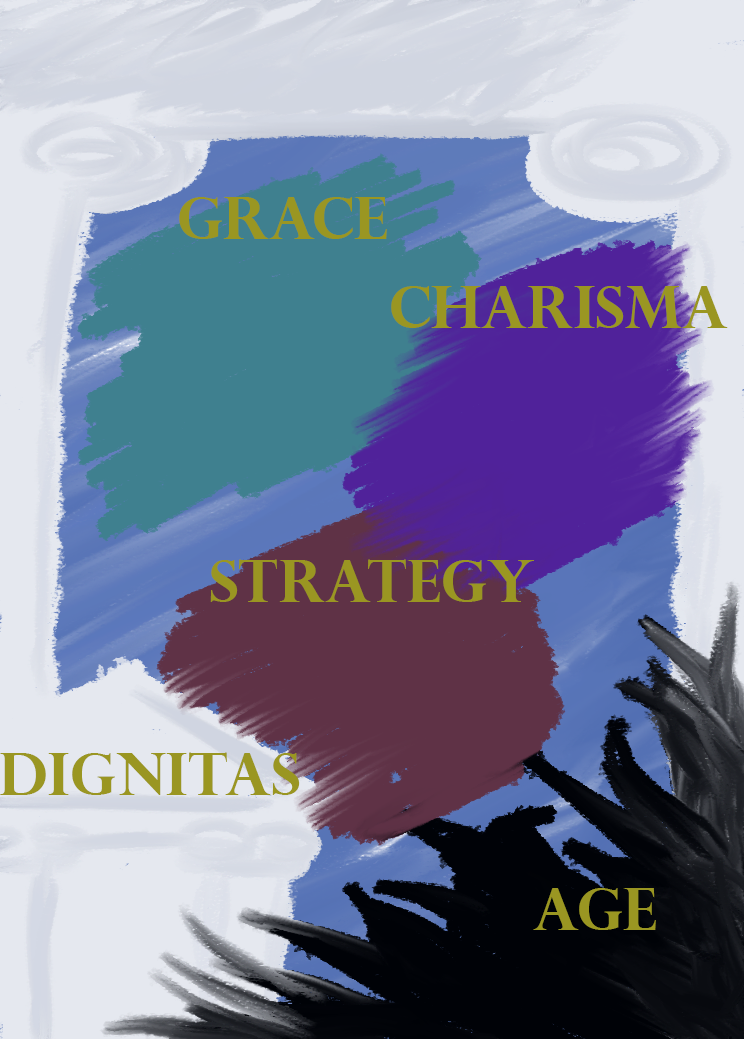
<style>
.page{position:relative;width:744px;height:1039px}
.page>*{position:absolute;margin:0}
.t1{font:58.3px "PerpetuaTitlingMT-Bold";color:#9a9622}
</style>
<div class="page">
<p class="t1" style="left:179px;top:197px;width:208px;height:42px">Grace</p>
<p class="t1" style="left:391px;top:286px;width:337px;height:42px">charisma</p>
<p class="t1" style="left:210px;top:559px;width:324px;height:43px">Strategy</p>
<p class="t1" style="left:0px;top:752px;width:300px;height:43px">dignitas</p>
<p class="t1" style="left:533px;top:888px;width:123px;height:42px">age</p>
</div>
